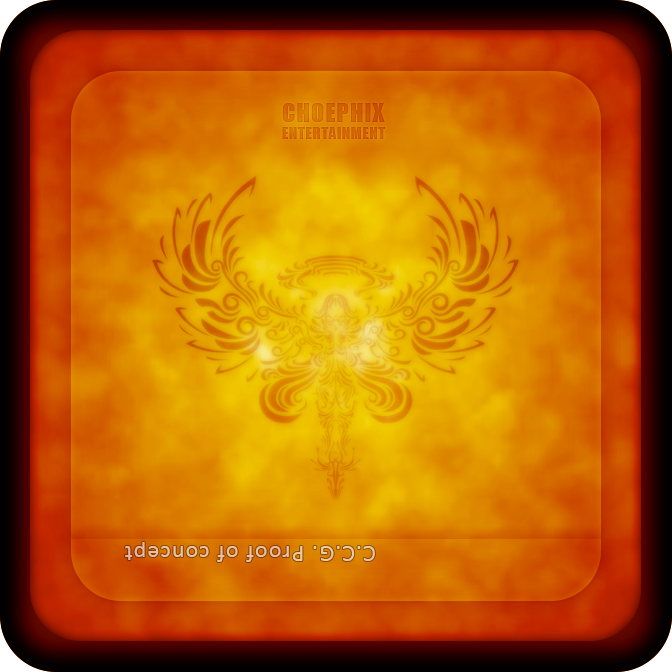
<style>
.page{position:relative;width:672px;height:672px}
.page>*{position:absolute;margin:0}
.t1{font:24px "Impact";letter-spacing:0.05em;color:#d26300}
.t2{font:15px "Impact";letter-spacing:0.05em;color:#d26300}
.t3{font:24px "Calibri";letter-spacing:0.05em;color:#ebc1a3}
</style>
<div class="page">
<p class="t1" style="left:282px;top:103px;width:103px;height:19px">CHOEPHIX</p>
<p class="t2" style="left:282px;top:127px;width:103px;height:12px">ENTERTAINMENT</p>
<p class="t3" style="left:125px;top:542px;width:250px;height:20px;rotate:180deg">C.C.G. Proof of concept</p>
</div>
